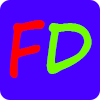
<style>
.page{position:relative;width:100px;height:100px;background:#4800ff}
.page>*{position:absolute;margin:0}
.t1{font:74.9px "SegoeScript-Bold";letter-spacing:-0.03em;color:#ff0000;scale:0.83 1}
.t2{font:74.9px "SegoeScript-Bold";letter-spacing:-0.03em;color:#72fe00;scale:0.83 1}
</style>
<div class="page">
<p class="t1" style="left:9px;top:20px;width:83px;height:58px">F<span class="t2">D</span></p>
</div>
